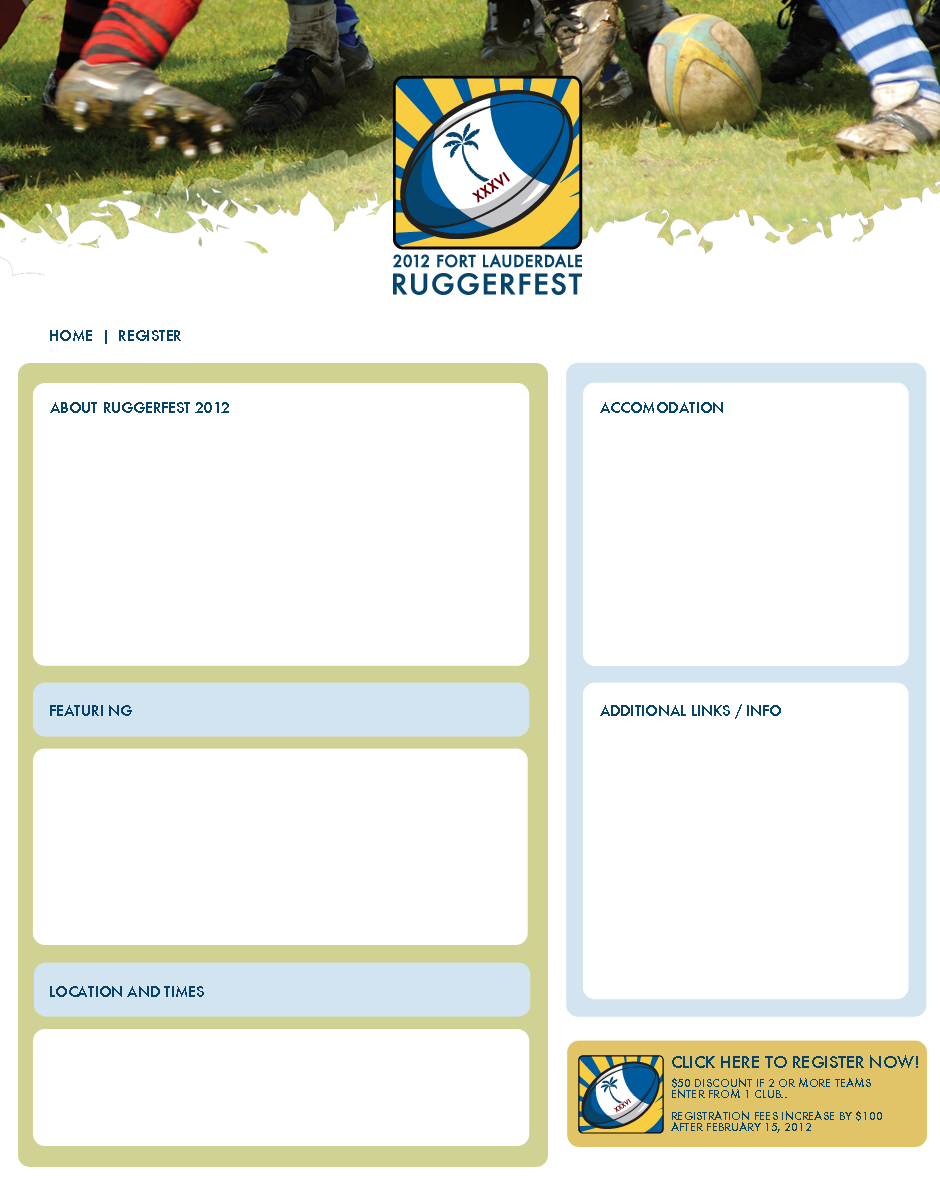
<style>
.page{position:relative;width:940px;height:1200px;background:#ffffff}
.page>*{position:absolute;margin:0}
.t1{font:14px "Futura-Medium";color:#06446b}
.t2{font:16px "Futura-Medium";color:#06446b}
.t3{font:11px/11px "Futura-Medium";color:#06446b}
</style>
<div class="page">
<p class="t1" style="left:50px;top:330px;width:131px;height:14px">HOME  |  REGISTER</p>
<p class="t1" style="left:50px;top:402px;width:179px;height:11px">ABOUT RUGGERFEST 2012</p>
<p class="t1" style="left:600px;top:402px;width:123px;height:11px">ACCOMODATION</p>
<p class="t1" style="left:50px;top:705px;width:82px;height:11px">FEATURI NG</p>
<p class="t1" style="left:600px;top:704px;width:181px;height:15px">ADDITIONAL LINKS / INFO</p>
<p class="t1" style="left:50px;top:986px;width:154px;height:11px">LOCATION AND TIMES</p>
<p class="t2" style="left:672px;top:1055px;width:246px;height:13px">CLICK HERE TO REGISTER NOW!</p>
<p class="t3" style="left:671px;top:1078px;width:211px;height:55px">$50 DISCOUNT IF 2 OR MORE TEAMS<br>ENTER FROM 1 CLUB..<br><br>REGISTRATION FEES INCREASE BY $100 <br>AFTER FEBRUARY 15, 2012</p>
</div>
